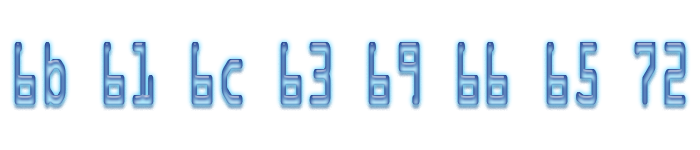
<style>
.page{position:relative;width:700px;height:150px;background:#ffffff}
.page>*{position:absolute;margin:0}
.t1{font:93.6px "OCRAExtended";font-weight:bold;scale:0.5 1}
</style>
<div class="page">
<p class="t1" style="left:14px;top:42px;width:672px;height:63px">6b 61 6c 63 69 66 65 72</p>
</div>
